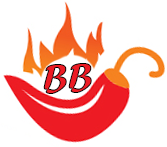
<style>
.page{position:relative;width:167px;height:147px;background:#ffffff}
.page>*{position:absolute;margin:0}
.t1{font:37.9px "ForteMT"}
</style>
<div class="page">
<p class="t1" style="left:43px;top:63px;width:49px;height:31px;rotate:-2deg">BB</p>
</div>
